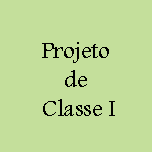
<style>
.page{position:relative;width:152px;height:152px;background:#c4df9b}
.page>*{position:absolute;margin:0}
.t1{font:24px "Andalus";color:#000000}
</style>
<div class="page">
<p class="t1" style="left:42px;top:42px;width:73px;height:74px;text-align:center">Projeto <br>de<br> Classe I</p>
</div>
